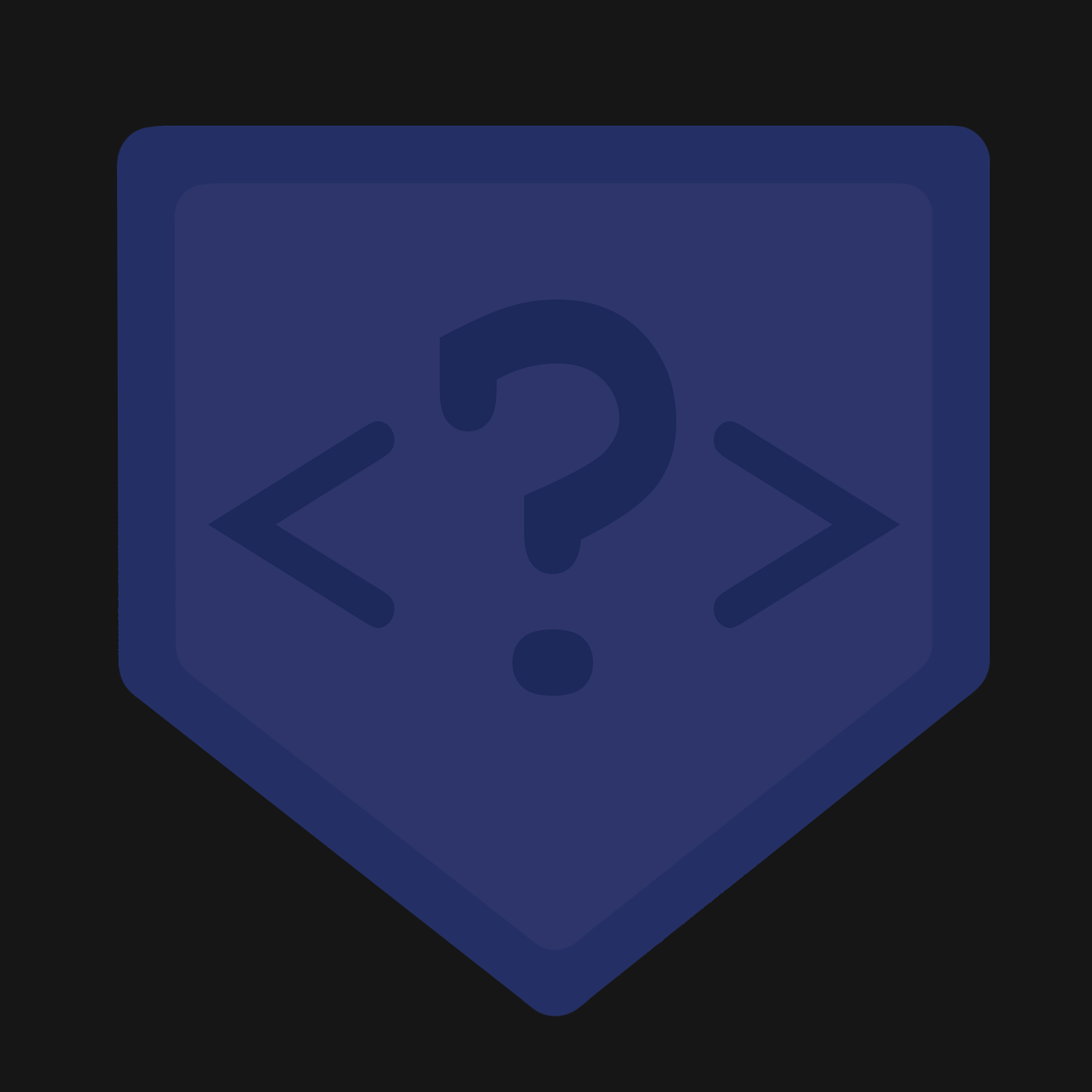
<style>
.page{position:relative;width:1092px;height:1092px;background:#161616}
.page>*{position:absolute;margin:0}
.t1{font:364px "CourierNewPS-BoldMT";letter-spacing:-0.08em;color:#1c295a;scale:0.89 1}
.t2{font:637px "CourierNewPS-BoldMT";letter-spacing:-0.04em;color:#1c295a;scale:0.89 1}
.t3{font:364px "CourierNewPS-BoldMT";letter-spacing:-0.04em;color:#1c295a;scale:0.89 1}
</style>
<div class="page">
<p class="t1" style="left:207px;top:300px;width:693px;height:396px">&lt;<span class="t2">?</span><span class="t3">&gt;</span></p>
</div>
